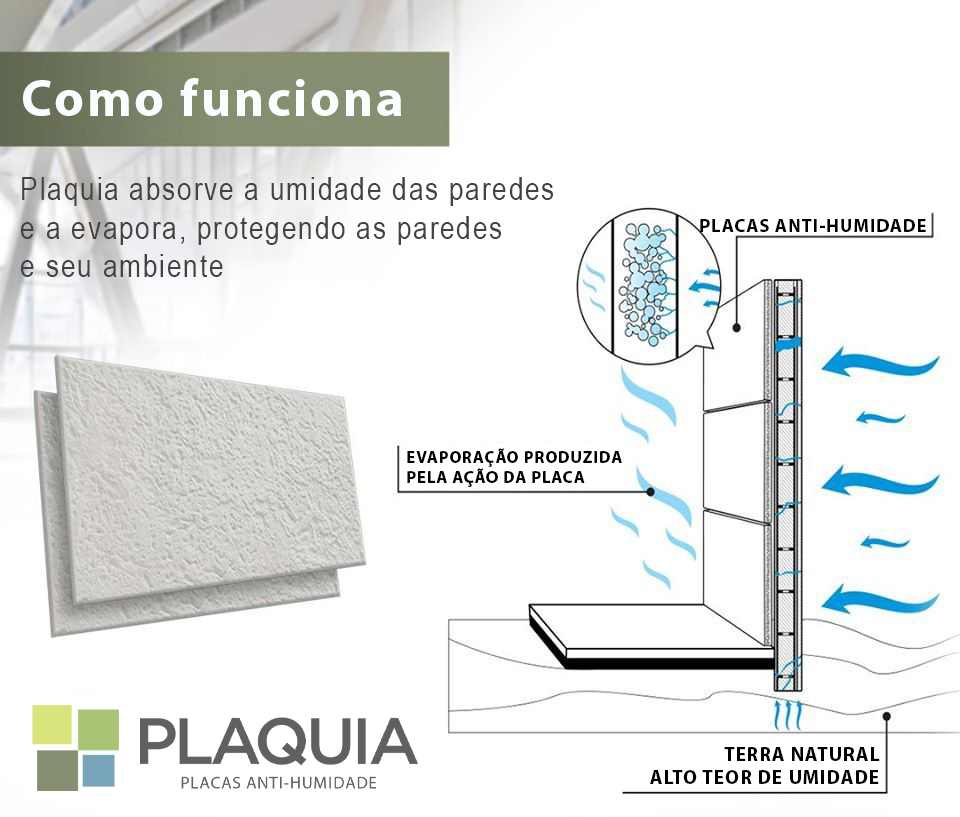
<style>
.page{position:relative;width:960px;height:817px;background:#ffffff}
.page>*{position:absolute;margin:0}
.t1{font:52.3px "MyriadHebrew-Bold";letter-spacing:0.05em;color:#fbfdfe}
.t2{font:32.4px "ArialNarrow";letter-spacing:0.05em;color:#434343}
.t3{font:18.5px "MyriadHebrew-Bold";letter-spacing:0.05em;color:#000000}
.t4{font:16.8px "MyriadHebrew-Bold";letter-spacing:0.05em;color:#000000}
.t5{font:19.5px "MyriadHebrew-Bold";letter-spacing:0.05em;color:#000000}
</style>
<div class="page">
<p class="t1" style="left:23px;top:78px;width:378px;height:38px">Como funciona</p>
<p class="t2" style="left:21px;top:177px;width:532px;height:100px">Plaquia absorve a umidade das paredes<br>e a evapora, protegendo as paredes <br>e seu ambiente</p>
<p class="t3" style="left:700px;top:219px;width:226px;height:13px">PLACAS ANTI-HUMIDADE</p>
<p class="t4" style="left:407px;top:448px;width:215px;height:39px">EVAPORAÇÃO PRODUZIDA <br>PELA AÇÃO DA PLACA</p>
<p class="t5" style="left:650px;top:747px;width:230px;height:37px;text-align:right">TERRA NATURAL<br>ALTO TEOR DE UMIDADE</p>
</div>
